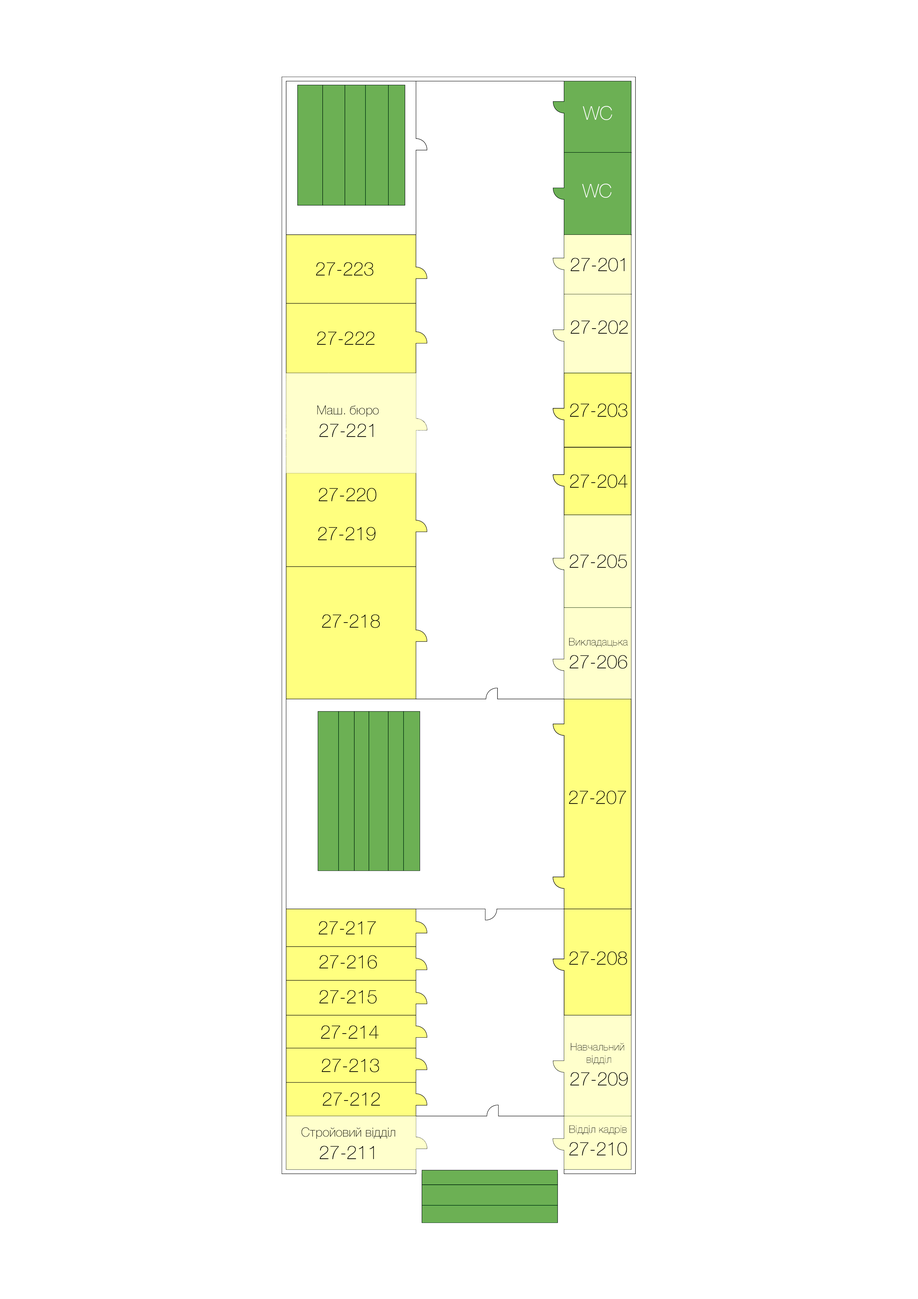
<style>
.page{position:relative;width:918px;height:1299px;background:#ffffff}
.page>*{position:absolute;margin:0}
.t1{font:18.8px "HelveticaNeue-Thin";color:#ffffff}
.t2{font:18.8px "HelveticaNeue-Thin";color:#000000}
.t3{font:12.6px "HelveticaNeue-Thin";color:#000100}
.t4{font:18.8px "HelveticaNeue-Thin";color:#000100}
.t5{font:10.5px "HelveticaNeue-Thin";color:#000000}
.t6{font:10.5px "HelveticaNeue-Thin";color:#000100}
.t7{font:12.6px "HelveticaNeue-Thin";color:#000000}
</style>
<div class="page">
<p class="t1" style="left:583px;top:106px;width:29px;height:14px">WC</p>
<p class="t1" style="left:582px;top:184px;width:30px;height:14px">WC</p>
<p class="t2" style="left:570px;top:258px;width:55px;height:13px">27-201</p>
<p class="t2" style="left:316px;top:262px;width:57px;height:14px">27-223</p>
<p class="t2" style="left:570px;top:320px;width:58px;height:14px">27-202</p>
<p class="t2" style="left:317px;top:331px;width:58px;height:14px">27-222</p>
<p class="t3" style="left:317px;top:405px;width:62px;height:32px;text-align:center">Маш. бюро<br><span class="t4">27-221</span></p>
<p class="t2" style="left:570px;top:403px;width:57px;height:14px">27-203</p>
<p class="t2" style="left:570px;top:474px;width:58px;height:14px">27-204</p>
<p class="t2" style="left:319px;top:488px;width:57px;height:14px">27-220</p>
<p class="t2" style="left:318px;top:527px;width:57px;height:14px">27-219</p>
<p class="t2" style="left:569px;top:554px;width:58px;height:14px">27-205</p>
<p class="t2" style="left:322px;top:614px;width:58px;height:14px">27-218</p>
<p class="t5" style="left:569px;top:638px;width:59px;height:31px;text-align:center">Викладацька<br><span class="t2">27-206</span></p>
<p class="t2" style="left:569px;top:790px;width:57px;height:14px">27-207</p>
<p class="t2" style="left:319px;top:921px;width:57px;height:13px">27-217</p>
<p class="t2" style="left:569px;top:951px;width:58px;height:14px">27-208</p>
<p class="t2" style="left:319px;top:955px;width:58px;height:14px">27-216</p>
<p class="t2" style="left:319px;top:990px;width:58px;height:14px">27-215</p>
<p class="t2" style="left:321px;top:1025px;width:58px;height:14px">27-214</p>
<p class="t6" style="left:570px;top:1043px;width:58px;height:43px;text-align:center">Навчальний <br>відділ<br><span class="t4">27-209</span></p>
<p class="t2" style="left:322px;top:1059px;width:57px;height:13px">27-213</p>
<p class="t2" style="left:323px;top:1092px;width:57px;height:14px">27-212</p>
<p class="t7" style="left:301px;top:1127px;width:94px;height:32px;text-align:center">Стройовий відділ<br><span class="t2">27-211</span></p>
<p class="t5" style="left:569px;top:1125px;width:58px;height:31px;text-align:center">Відділ кадрів<br><span class="t2">27-210</span></p>
</div>
